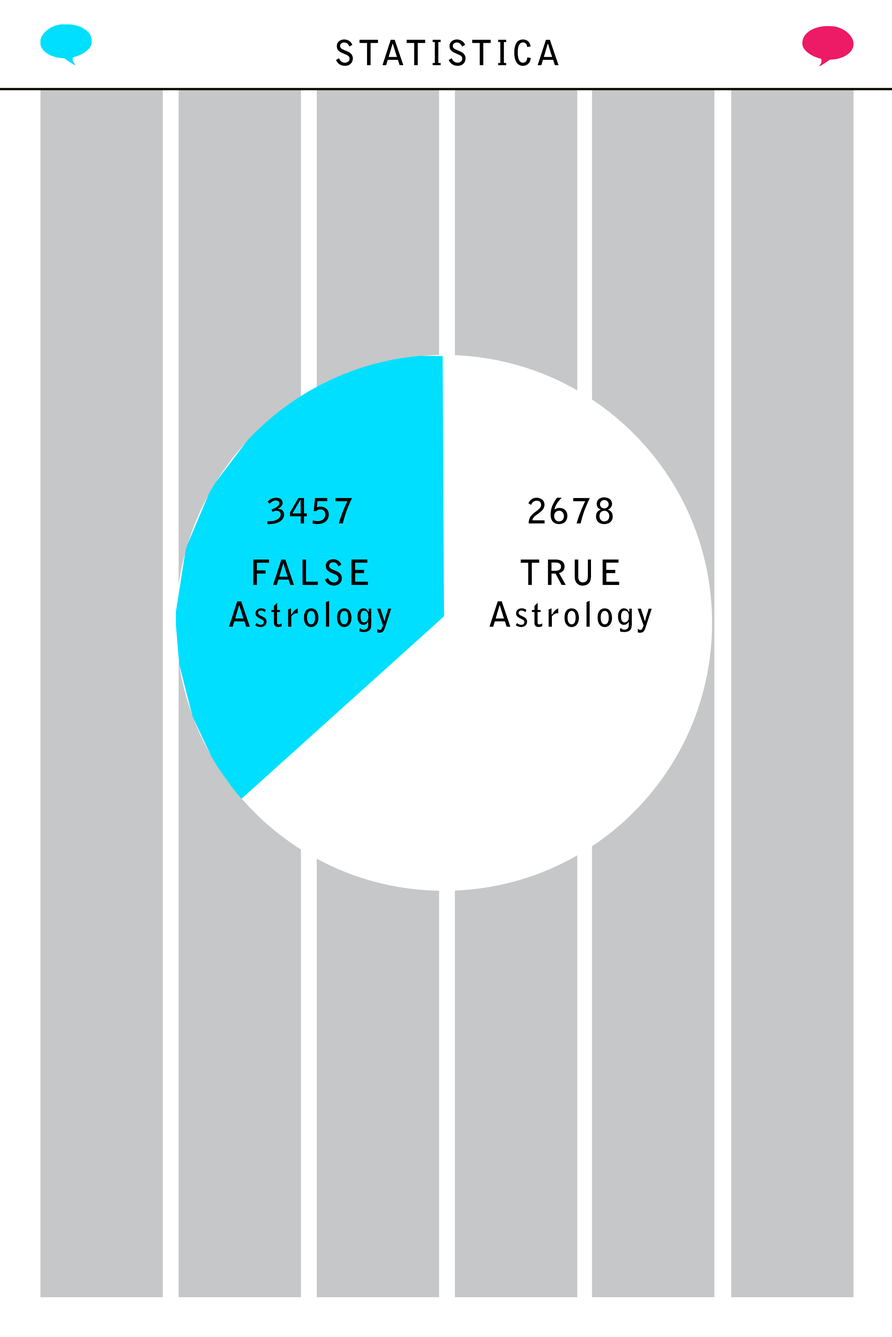
<style>
.page{position:relative;width:892px;height:1337px;background:#c6c7c9}
.page>*{position:absolute;margin:0}
.t1{font:34.8px "BellGothicStd-Bold";letter-spacing:0.09em;color:#000000}
.t2{font:34.8px/41.8px "BellGothicStd-Bold";letter-spacing:0.09em;color:#000000}
</style>
<div class="page">
<p class="t1" style="left:336px;top:39px;width:222px;height:27px">STATISTICA</p>
<p class="t1" style="left:267px;top:498px;width:85px;height:27px">3457</p>
<p class="t1" style="left:528px;top:497px;width:84px;height:28px">2678</p>
<p class="t2" style="left:229px;top:559px;width:162px;height:74px;text-align:center">FALSE<br>Astrology</p>
<p class="t2" style="left:489px;top:559px;width:163px;height:74px;text-align:center">TRUE<br>Astrology</p>
</div>
